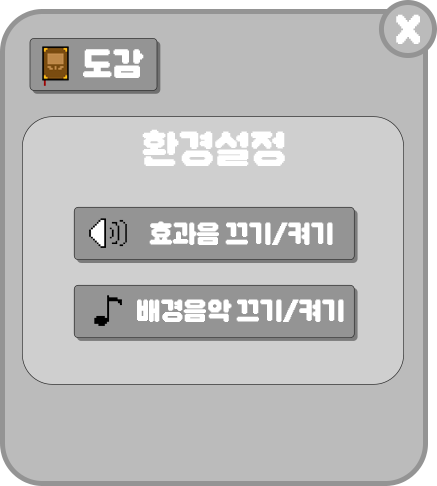
<style>
.page{position:relative;width:437px;height:486px;background:#bbbbbb}
.page>*{position:absolute;margin:0}
.t1{font:39px "DNFBitBitOTF";letter-spacing:-0.02em;color:#ffffff}
.t2{font:38.4px "DNFBitBitOTF";letter-spacing:-0.02em;color:#ffffff}
.t3{font:46px "DNFBitBitOTF";letter-spacing:-0.02em;color:#ffffff}
.t4{font:30px "DNFBitBitOTF";letter-spacing:-0.02em;color:#ffffff}
</style>
<div class="page">
<p class="t1" style="left:396px;top:14px;width:24px;height:30px">X</p>
<p class="t2" style="left:83px;top:49px;width:61px;height:29px">도감</p>
<p class="t3" style="left:142px;top:129px;width:143px;height:37px">환경설정</p>
<p class="t4" style="left:149px;top:221px;width:184px;height:24px">효과음 끄기/켜기</p>
<p class="t4" style="left:137px;top:299px;width:207px;height:23px">배경음악 끄기/켜기</p>
</div>
